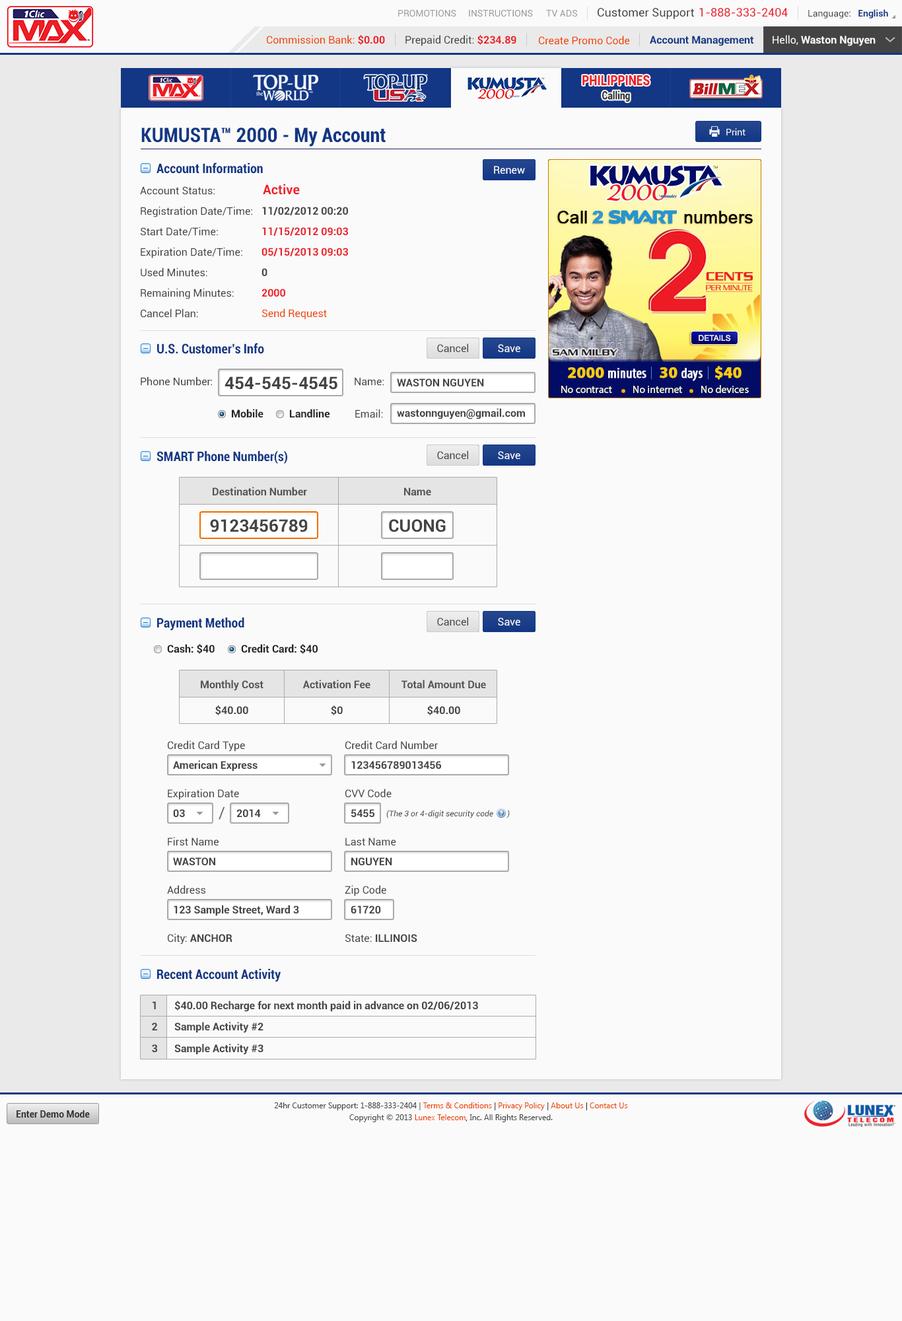
<style>
.page{position:relative;width:902px;height:1321px;background:#fafafa}
.page>*{position:absolute;margin:0}
.t1{font:9.2px "Roboto-Regular";color:#999999}
.t2{font:11.6px "Roboto-Regular";color:#444444}
.t3{font:11.6px "Roboto-Regular";color:#ec2029}
.t4{font:9.2px "Roboto-Regular";color:#444444}
.t5{font:9.2px "Roboto-Bold";color:#123785}
.t6{font:10.6px "Roboto-Regular";color:#ee4400}
.t7{font:10.6px "Roboto-Bold";color:#ec2028}
.t8{font:10.6px "Roboto-Regular";color:#444444}
.t9{font:10.6px "Roboto-Bold";color:#123785}
.t10{font:10.6px "Roboto-Bold";color:#fafafa}
.t11{font:10.6px "Roboto-Regular";color:#fafafa}
.t12{font:14.1px "Roboto-Black";color:#ec2028;scale:0.81 1}
.t13{font:11.3px "Roboto-Black";color:#333333;scale:0.81 1}
.t14{font:19.8px "Roboto-BoldCondensed";color:#123785}
.t15{font:9.2px "Roboto-Regular";color:#fafafa}
.t16{font:13.2px "Roboto-BoldCondensed";color:#123785}
.t17{font:10.6px "Roboto-Regular";color:#ffffff}
.t18{font:13.2px "Roboto-Bold";color:#ec222a}
.t19{font:10.6px "Roboto-Bold";color:#444444}
.t20{font:10.6px "Roboto-Bold";color:#ec222a}
.t21{font:17.2px "Roboto-Bold";color:#444444}
.t22{font:10.6px "Roboto-Bold";color:#222222}
.t23{font:10.6px "Roboto-Bold";color:#555555}
.t24{font:15.9px "Roboto-Regular";color:#666666}
.t25{font:7.9px "Roboto-Italic";color:#444444}
.t26{font:7.9px/11.9px "SegoeUI";color:#444444}
.t27{font:7.9px/11.9px "SegoeUI";color:#ee4400}
.t28{font:7.9px/11.9px "SegoeUI";color:#333333}
.t29{font:9.2px "Roboto-Bold";color:#333333}
</style>
<div class="page">
<p class="t1" style="left:398px;top:10px;width:59px;height:7px">PROMOTIONS</p>
<p class="t1" style="left:469px;top:10px;width:64px;height:7px">INSTRUCTIONS</p>
<p class="t1" style="left:546px;top:10px;width:31px;height:7px">TV ADS</p>
<p class="t2" style="left:598px;top:8px;width:96px;height:11px">Customer Support</p>
<p class="t3" style="left:700px;top:8px;width:88px;height:9px">1-888-333-2404</p>
<p class="t4" style="left:809px;top:9px;width:80px;height:9px">Language:   <span class="t5">English</span></p>
<p class="t6" style="left:267px;top:35px;width:118px;height:10px">Commission Bank: <span class="t7">$0.00</span></p>
<p class="t8" style="left:406px;top:35px;width:111px;height:11px">Prepaid Credit: <span class="t7">$234.89</span></p>
<p class="t6" style="left:539px;top:36px;width:91px;height:9px">Create Promo Code</p>
<p class="t9" style="left:650px;top:36px;width:104px;height:10px">Account Management</p>
<p class="t10" style="left:773px;top:35px;width:103px;height:11px"><span class="t11">Hello, </span>Waston Nguyen</p>
<p class="t12" style="left:583px;top:75px;width:67px;height:11px">PHILIPPINES</p>
<p class="t13" style="left:603px;top:91px;width:27px;height:11px">Calling</p>
<p class="t14" style="left:141px;top:128px;width:245px;height:19px">KUMUSTA™ 2000 - My Account</p>
<p class="t15" style="left:727px;top:128px;width:19px;height:7px">Print</p>
<p class="t16" style="left:157px;top:163px;width:106px;height:11px">Account Information</p>
<p class="t17" style="left:494px;top:166px;width:31px;height:8px">Renew</p>
<p class="t18" style="left:263px;top:184px;width:37px;height:11px">Active</p>
<p class="t8" style="left:140px;top:186px;width:75px;height:9px">Account Status:</p>
<p class="t8" style="left:141px;top:206px;width:111px;height:11px">Registration Date/Time:</p>
<p class="t19" style="left:262px;top:207px;width:86px;height:8px">11/02/2012 00:20</p>
<p class="t8" style="left:141px;top:227px;width:77px;height:10px">Start Date/Time:</p>
<p class="t20" style="left:262px;top:227px;width:86px;height:9px">11/15/2012 09:03</p>
<p class="t8" style="left:141px;top:247px;width:101px;height:11px">Expiration Date/Time:</p>
<p class="t20" style="left:262px;top:248px;width:86px;height:8px">05/15/2013 09:03</p>
<p class="t8" style="left:141px;top:268px;width:66px;height:9px">Used Minutes:</p>
<p class="t19" style="left:262px;top:268px;width:6px;height:8px">0</p>
<p class="t8" style="left:141px;top:288px;width:93px;height:11px">Remaining Minutes:</p>
<p class="t20" style="left:262px;top:289px;width:23px;height:8px">2000</p>
<p class="t8" style="left:141px;top:309px;width:57px;height:9px">Cancel Plan:</p>
<p class="t6" style="left:262px;top:309px;width:65px;height:11px">Send Request</p>
<p class="t16" style="left:157px;top:343px;width:107px;height:11px">U.S. Customer’s Info</p>
<p class="t8" style="left:437px;top:344px;width:31px;height:9px">Cancel</p>
<p class="t17" style="left:498px;top:344px;width:23px;height:9px">Save</p>
<p class="t8" style="left:141px;top:377px;width:71px;height:9px">Phone Number:</p>
<p class="t21" style="left:225px;top:377px;width:113px;height:13px">454-545-4545</p>
<p class="t8" style="left:355px;top:377px;width:29px;height:9px">Name:</p>
<p class="t19" style="left:397px;top:379px;width:87px;height:7px">WASTON NGUYEN</p>
<p class="t22" style="left:232px;top:409px;width:32px;height:9px">Mobile</p>
<p class="t22" style="left:290px;top:409px;width:40px;height:9px">Landline</p>
<p class="t8" style="left:355px;top:409px;width:28px;height:9px">Email:</p>
<p class="t19" style="left:397px;top:408px;width:128px;height:12px">wastonnguyen@gmail.com</p>
<p class="t16" style="left:157px;top:451px;width:130px;height:13px">SMART Phone Number(s)</p>
<p class="t8" style="left:437px;top:451px;width:31px;height:9px">Cancel</p>
<p class="t17" style="left:498px;top:451px;width:23px;height:9px">Save</p>
<p class="t23" style="left:213px;top:487px;width:94px;height:9px">Destination Number</p>
<p class="t23" style="left:404px;top:488px;width:27px;height:8px">Name</p>
<p class="t21" style="left:210px;top:519px;width:98px;height:13px">9123456789</p>
<p class="t21" style="left:389px;top:519px;width:57px;height:13px">CUONG</p>
<p class="t16" style="left:157px;top:617px;width:87px;height:14px">Payment Method</p>
<p class="t8" style="left:437px;top:617px;width:31px;height:9px">Cancel</p>
<p class="t17" style="left:498px;top:618px;width:23px;height:8px">Save</p>
<p class="t22" style="left:167px;top:644px;width:48px;height:10px">Cash: $40</p>
<p class="t22" style="left:241px;top:644px;width:77px;height:10px">Credit Card: $40</p>
<p class="t23" style="left:201px;top:680px;width:63px;height:11px">Monthly Cost</p>
<p class="t23" style="left:303px;top:680px;width:68px;height:9px">Activation Fee</p>
<p class="t23" style="left:402px;top:680px;width:84px;height:9px">Total Amount Due</p>
<p class="t19" style="left:215px;top:706px;width:33px;height:9px">$40.00</p>
<p class="t19" style="left:331px;top:706px;width:12px;height:9px">$0</p>
<p class="t19" style="left:427px;top:706px;width:33px;height:9px">$40.00</p>
<p class="t8" style="left:168px;top:741px;width:77px;height:11px">Credit Card Type</p>
<p class="t8" style="left:346px;top:741px;width:92px;height:9px">Credit Card Number</p>
<p class="t19" style="left:173px;top:760px;width:85px;height:12px">American Express</p>
<p class="t19" style="left:351px;top:761px;width:90px;height:8px">123456789013456</p>
<p class="t8" style="left:168px;top:789px;width:71px;height:11px">Expiration Date</p>
<p class="t8" style="left:346px;top:789px;width:46px;height:8px">CVV Code</p>
<p class="t19" style="left:173px;top:809px;width:12px;height:8px">03</p>
<p class="t24" style="left:219px;top:807px;width:6px;height:13px">/</p>
<p class="t19" style="left:237px;top:809px;width:24px;height:8px">2014</p>
<p class="t19" style="left:351px;top:809px;width:24px;height:8px">5455</p>
<p class="t25" style="left:386px;top:810px;width:124px;height:9px">(The 3 or 4-digit security code       )</p>
<p class="t8" style="left:168px;top:837px;width:51px;height:9px">First Name</p>
<p class="t8" style="left:346px;top:838px;width:50px;height:8px">Last Name</p>
<p class="t19" style="left:173px;top:858px;width:42px;height:7px">WASTON</p>
<p class="t19" style="left:351px;top:858px;width:41px;height:7px">NGUYEN</p>
<p class="t8" style="left:167px;top:885px;width:38px;height:9px">Address</p>
<p class="t8" style="left:345px;top:885px;width:41px;height:12px">Zip Code</p>
<p class="t19" style="left:174px;top:905px;width:125px;height:11px">123 Sample Street, Ward 3</p>
<p class="t19" style="left:351px;top:906px;width:30px;height:8px">61720</p>
<p class="t19" style="left:168px;top:934px;width:65px;height:11px"><span class="t8">City: </span>ANCHOR</p>
<p class="t19" style="left:346px;top:934px;width:72px;height:9px"><span class="t8">State: </span>ILLINOIS</p>
<p class="t16" style="left:157px;top:969px;width:124px;height:13px">Recent Account Activity</p>
<p class="t19" style="left:153px;top:1002px;width:3px;height:7px">1</p>
<p class="t19" style="left:174px;top:1001px;width:304px;height:11px">$40.00 Recharge for next month paid in advance on 02/06/2013</p>
<p class="t19" style="left:152px;top:1023px;width:5px;height:8px">2</p>
<p class="t19" style="left:174px;top:1022px;width:90px;height:11px">Sample Activity #2</p>
<p class="t19" style="left:152px;top:1045px;width:5px;height:7px">3</p>
<p class="t19" style="left:174px;top:1044px;width:90px;height:11px">Sample Activity #3</p>
<p class="t26" style="left:274px;top:1103px;width:354px;height:19px;text-align:center">24hr Customer Support: 1-888-333-2404 | <span class="t27">Terms &amp; Conditions</span><span class="t28"> | </span><span class="t27">Privacy Policy</span><span class="t28"> | </span><span class="t27">About Us</span><span class="t28"> | </span><span class="t27">Contact Us<br></span>Copyright © 2013 <span class="t27">Lunex Telecom</span><span class="t28">,</span> Inc. All Rights Reserved.</p>
<p class="t29" style="left:17px;top:1111px;width:73px;height:7px">Enter Demo Mode</p>
</div>
